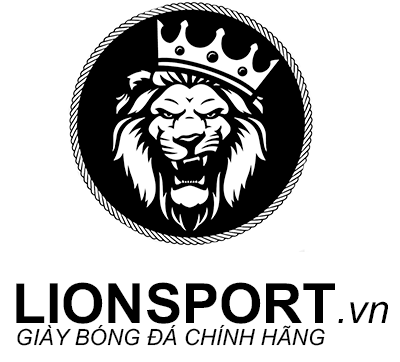
<style>
.page{position:relative;width:400px;height:362px;background:#ffffff}
.page>*{position:absolute;margin:0}
.t1{font:22.2px/22.2px "Arial-ItalicMT";letter-spacing:0.002em;color:#000000}
.t2{font:55.6px/20px "Arial-BoldMT";color:#000000}
.t3{font:40px/20px "Arial-ItalicMT";color:#000000}
</style>
<div class="page">
<p class="t1" style="left:16px;top:282px;width:372px;height:64px;text-align:center"><span class="t2">LIONSPORT</span><span class="t3">.vn<br>    </span>GIÀY BÓNG ĐÁ CHÍNH HÃNG</p>
</div>
